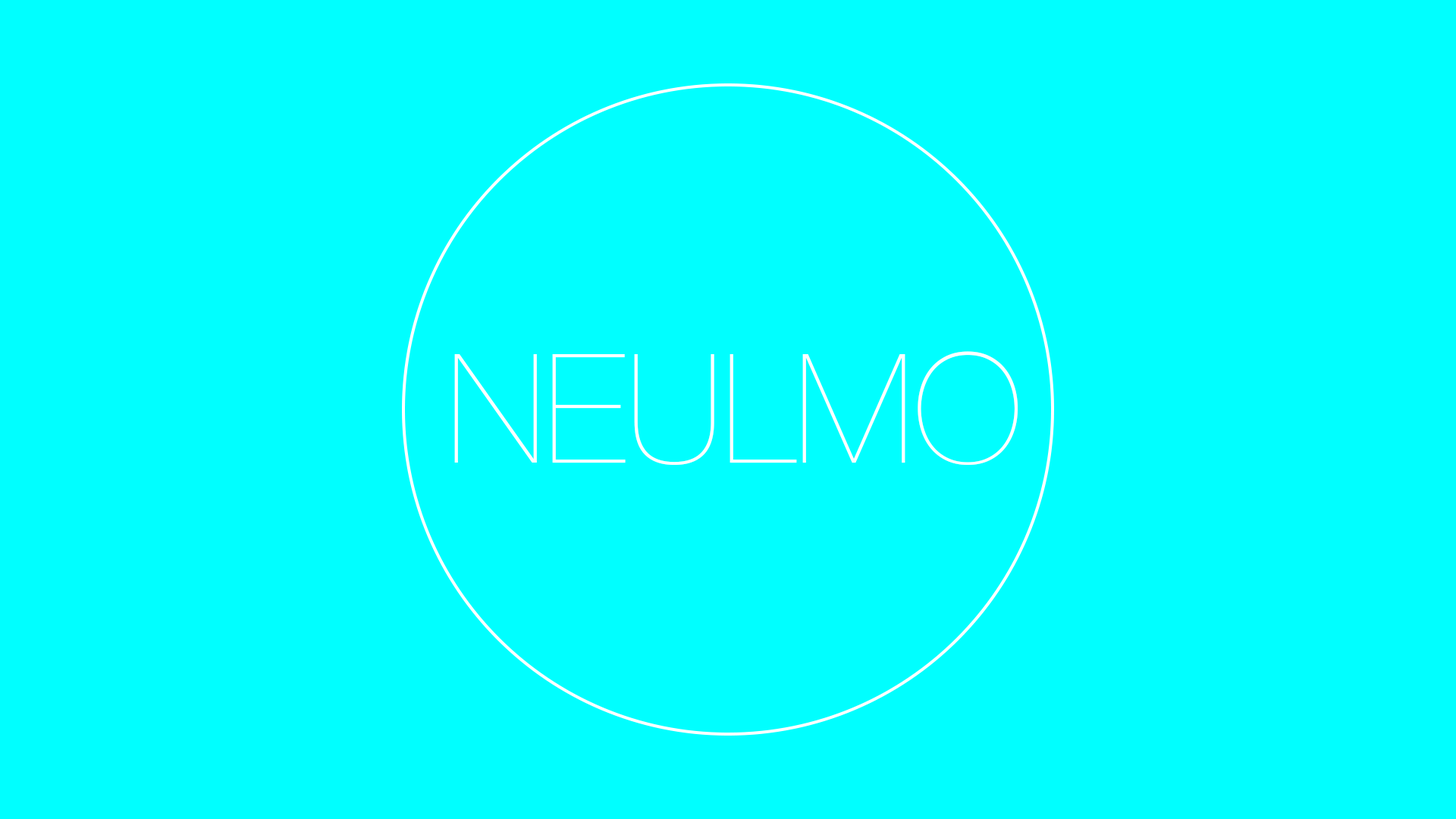
<style>
.page{position:relative;width:1456px;height:819px;background:#00ffff}
.page>*{position:absolute;margin:0}
.t1{font:151.7px "HelveticaNeue-UltraLight";color:#ffffff}
</style>
<div class="page">
<p class="t1" style="left:454px;top:351px;width:564px;height:114px">NEULMO</p>
</div>
